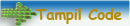
<style>
.page{position:relative;width:130px;height:26px}
.page>*{position:absolute;margin:0}
.t1{font:14.9px "ComicSansMS-Bold";color:#b48b0d}
</style>
<div class="page">
<p class="t1" style="left:36px;top:8px;width:86px;height:16px">Tampil Code</p>
</div>
